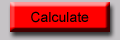
<style>
.page{position:relative;width:120px;height:40px;background:#ff0000}
.page>*{position:absolute;margin:0}
.t1{font:14px "ArialMT";color:#000000}
</style>
<div class="page">
<p class="t1" style="left:31px;top:11px;width:58px;height:12px">Calculate</p>
</div>
